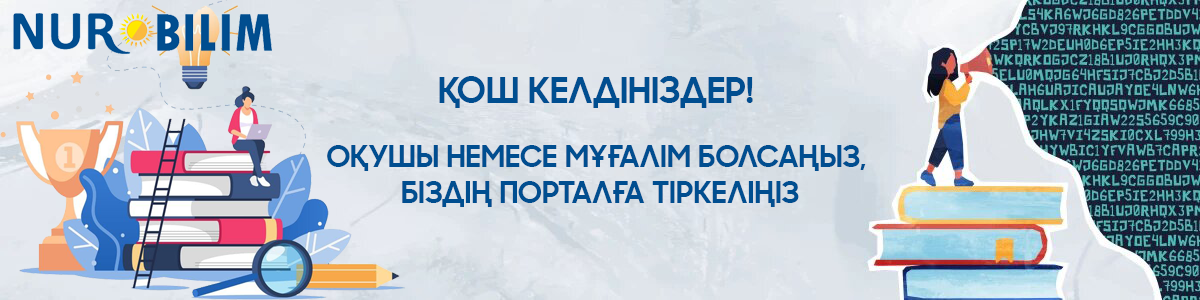
<style>
.page{position:relative;width:1200px;height:300px}
.page>*{position:absolute;margin:0}
.t1{font:36px "KZSamsungSharpSans-Bold";color:#004e90}
.t2{font:30px "KZSamsungSharpSans-Bold";color:#004e90}
</style>
<div class="page">
<p class="t1" style="left:439px;top:76px;width:314px;height:32px">ҚОШ КЕЛДІНІЗДЕР!</p>
<p class="t2" style="left:327px;top:145px;width:539px;height:62px;text-align:center">ОҚУШЫ НЕМЕСЕ МҰҒАЛІМ БОЛСАҢЫЗ, <br>БІЗДІҢ ПОРТАЛҒА ТІРКЕЛІҢІЗ</p>
</div>
